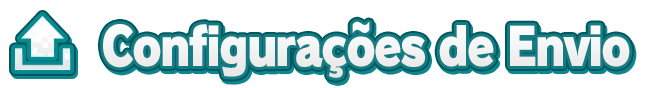
<style>
.page{position:relative;width:650px;height:88px;background:#ffffff}
.page>*{position:absolute;margin:0}
.t1{font:52px "RodinPro-UB";letter-spacing:-0.041em;color:#f2f2f3;scale:0.85 1}
</style>
<div class="page">
<p class="t1" style="left:103px;top:21px;width:527px;height:57px">Configurações de Envio</p>
</div>
